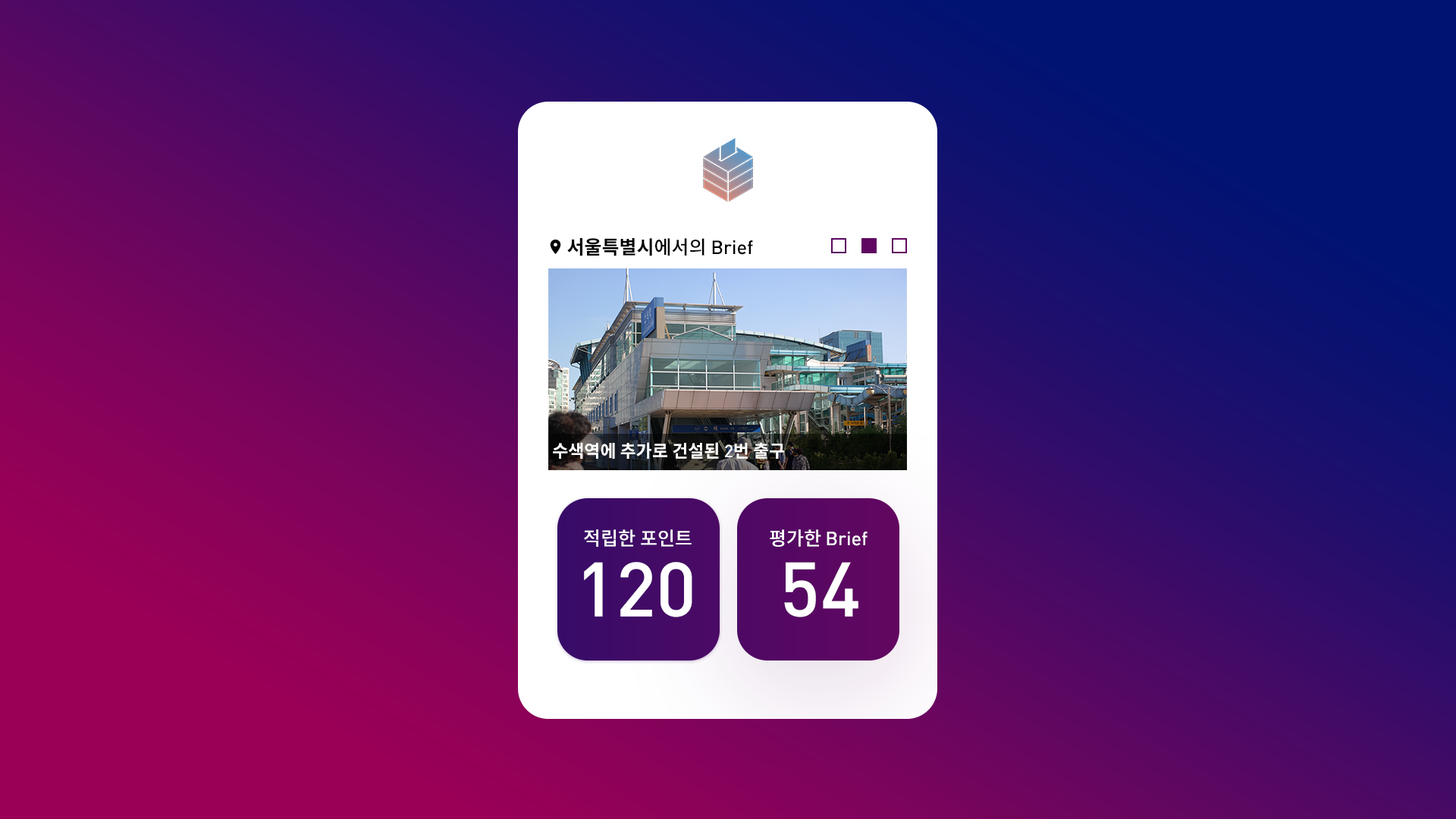
<style>
.page{position:relative;width:1456px;height:819px}
.page>*{position:absolute;margin:0}
.t1{font:19px "NotoSansCJKkr-Bold";color:#000000}
.t2{font:19px "NotoSansCJKkr-Medium";color:#000000}
.t3{font:19px "DIN-Medium";color:#000000}
.t4{font:17.4px "NotoSansCJKkr-Bold";color:#ffffff}
.t5{font:17.4px "DIN-Medium";color:#ffffff}
.t6{font:19px "NotoSansCJKkr-Medium";color:#ffffff}
.t7{font:19px "DIN-Medium";color:#ffffff}
.t8{font:75.8px "DIN-Medium";color:#ffffff}
</style>
<div class="page">
<p class="t1" style="left:567px;top:238px;width:186px;height:18px">서울특별시<span class="t2">에서의</span><span class="t3"> Brief</span></p>
<p class="t4" style="left:553px;top:442px;width:232px;height:17px">수색역에 추가로 건설된 <span class="t5">2</span>번 출구</p>
<p class="t6" style="left:584px;top:529px;width:108px;height:18px">적립한 포인트</p>
<p class="t7" style="left:770px;top:529px;width:98px;height:18px"><span class="t6">평가한 </span>Brief</p>
<p class="t8" style="left:584px;top:562px;width:108px;height:55px">120</p>
<p class="t8" style="left:784px;top:562px;width:74px;height:55px">54</p>
</div>
